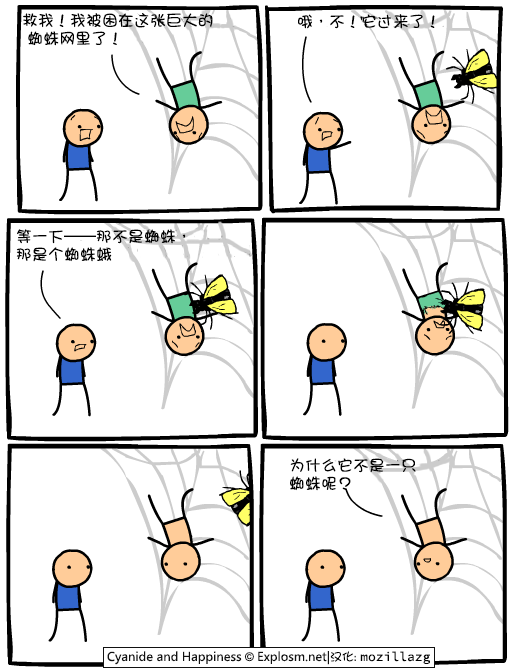
<style>
.page{position:relative;width:520px;height:670px;background:#ffffff}
.page>*{position:absolute;margin:0}
.t1{font:16px/18px "DFGirl";color:#000000}
.t2{font:16px "DFGirl";color:#000000}
</style>
<div class="page">
<p class="t1" style="left:23px;top:13px;width:190px;height:33px">救我！我被困在这张巨大的<br> 蜘蛛网里了！</p>
<p class="t2" style="left:298px;top:14px;width:137px;height:15px">哦，不！它过来了！</p>
<p class="t1" style="left:16px;top:229px;width:170px;height:33px">等一下——那不是蜘蛛，<br>那是个蜘蛛蛾</p>
<p class="t1" style="left:290px;top:458px;width:126px;height:33px">为什么它不是一只<br>蜘蛛呢？</p>
</div>
